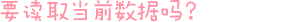
<style>
.page{position:relative;width:287px;height:22px;background:#ffffff}
.page>*{position:absolute;margin:0}
.t1{font:26px "¢è?";color:#ff93a5}
</style>
<div class="page">
<p class="t1" style="left:0px;top:0px;width:196px;height:22px">要读取当前数据吗？</p>
</div>
